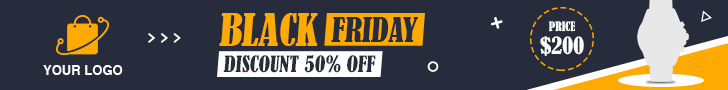
<style>
.page{position:relative;width:728px;height:90px;background:#262c3c}
.page>*{position:absolute;margin:0}
.t1{font:41.5px "BernardMT-Condensed";color:#ffa903}
.t2{font:31.5px "BernardMT-Condensed";color:#262c3c}
.t3{font:12px "BernardMT-Condensed";color:#ffffff}
.t4{font:22.3px "BernardMT-Condensed";color:#ffffff}
.t5{font:13.1px "Helvetica-Bold";color:#ffffff}
.t6{font:20.9px "BernardMT-Condensed";color:#262c3c}
</style>
<div class="page">
<p class="t1" style="left:219px;top:13px;width:99px;height:33px">BLACK</p>
<p class="t2" style="left:331px;top:17px;width:87px;height:25px">FRIDAY</p>
<p class="t3" style="left:549px;top:21px;width:27px;height:11px">PRICE</p>
<p class="t4" style="left:540px;top:36px;width:44px;height:20px">$200</p>
<p class="t5" style="left:43px;top:65px;width:80px;height:10px">YOUR LOGO</p>
<p class="t6" style="left:223px;top:55px;width:153px;height:18px">DISCOUNT 50% OFF</p>
</div>
